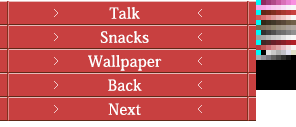
<style>
.page{position:relative;width:296px;height:127px;background:#c84040}
.page>*{position:absolute;margin:0}
.t1{font:15px/24px "KozMinPro-Medium";letter-spacing:0.025em;color:#ffffff}
</style>
<div class="page">
<p class="t1" style="left:88px;top:7px;width:74px;height:108px;text-align:center">Talk<br>Snacks<br>Wallpaper<br>Back<br>Next</p>
</div>
